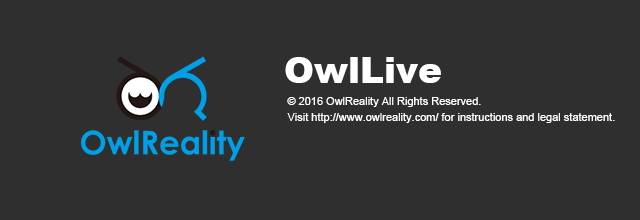
<style>
.page{position:relative;width:640px;height:220px;background:#302f2f}
.page>*{position:absolute;margin:0}
.t1{font:36px "Arial-Black";color:#ffffff}
.t2{font:11px "ArialMT";color:#ffffff}
</style>
<div class="page">
<p class="t1" style="left:285px;top:57px;width:156px;height:26px">OwlLive</p>
<p class="t2" style="left:287px;top:97px;width:194px;height:10px">© 2016 OwlReality All Rights Reserved.</p>
<p class="t2" style="left:287px;top:113px;width:328px;height:10px">Visit http://www.owlreality.com/ for instructions and legal statement.</p>
</div>
